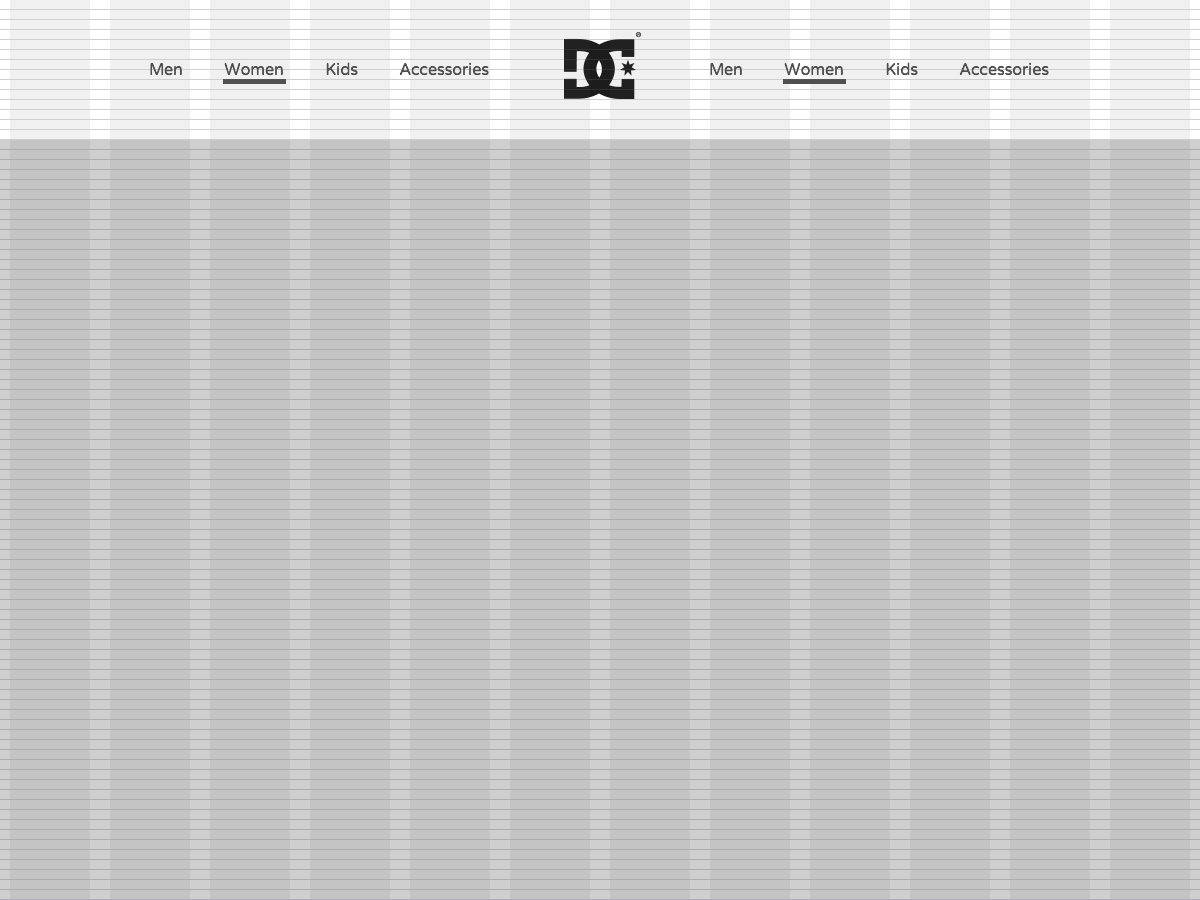
<style>
.page{position:relative;width:1200px;height:900px;background:#c4c4c4}
.page>*{position:absolute;margin:0}
.t1{font:16px "VarelaRound-Regular";color:#4f4f4f}
</style>
<div class="page">
<p class="t1" style="left:150px;top:62px;width:339px;height:14px">Men          Women          Kids          Accessories</p>
<p class="t1" style="left:710px;top:62px;width:339px;height:14px">Men          Women          Kids          Accessories</p>
</div>
